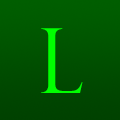
<style>
.page{position:relative;width:120px;height:120px}
.page>*{position:absolute;margin:0}
.t1{font:90px "PerpetuaTitlingMT-Light";color:#00ff00}
</style>
<div class="page">
<p class="t1" style="left:41px;top:28px;width:42px;height:65px">L</p>
</div>
